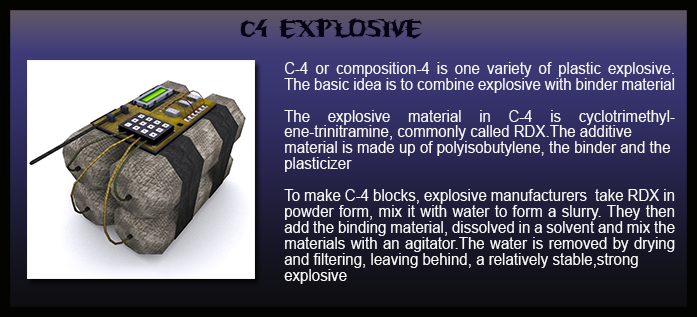
<style>
.page{position:relative;width:697px;height:317px}
.page>*{position:absolute;margin:0}
.t1{font:22.4px "UnrealTournament";letter-spacing:0.002em;color:#090214;scale:0.94 1}
.t2{font:15.9px/15.9px "ArialMT";letter-spacing:0.002em;color:#f8f7fa;scale:0.94 1}
</style>
<div class="page">
<p class="t1" style="left:240px;top:18px;width:183px;height:21px">C4 EXPLOSIVE</p>
<p class="t2" style="left:284px;top:62px;width:391px;height:222px;text-align:justify">C-4 or composition-4 is one variety of plastic explosive.  The basic idea is to combine explosive with binder material<br><br>The explosive material in C-4 is cyclotrimethylene-trinitramine, commonly called RDX.The additive <br>material is made up of polyisobutylene, the binder and the <br>plasticizer<br><br>To make C-4 blocks, explosive manufacturers  take RDX in powder form, mix it with water to form a slurry. They then add the binding material, dissolved in a solvent and mix the materials with an agitator.The water is removed by drying and filtering, leaving behind, a relatively stable,strong <br>explosive</p>
</div>
